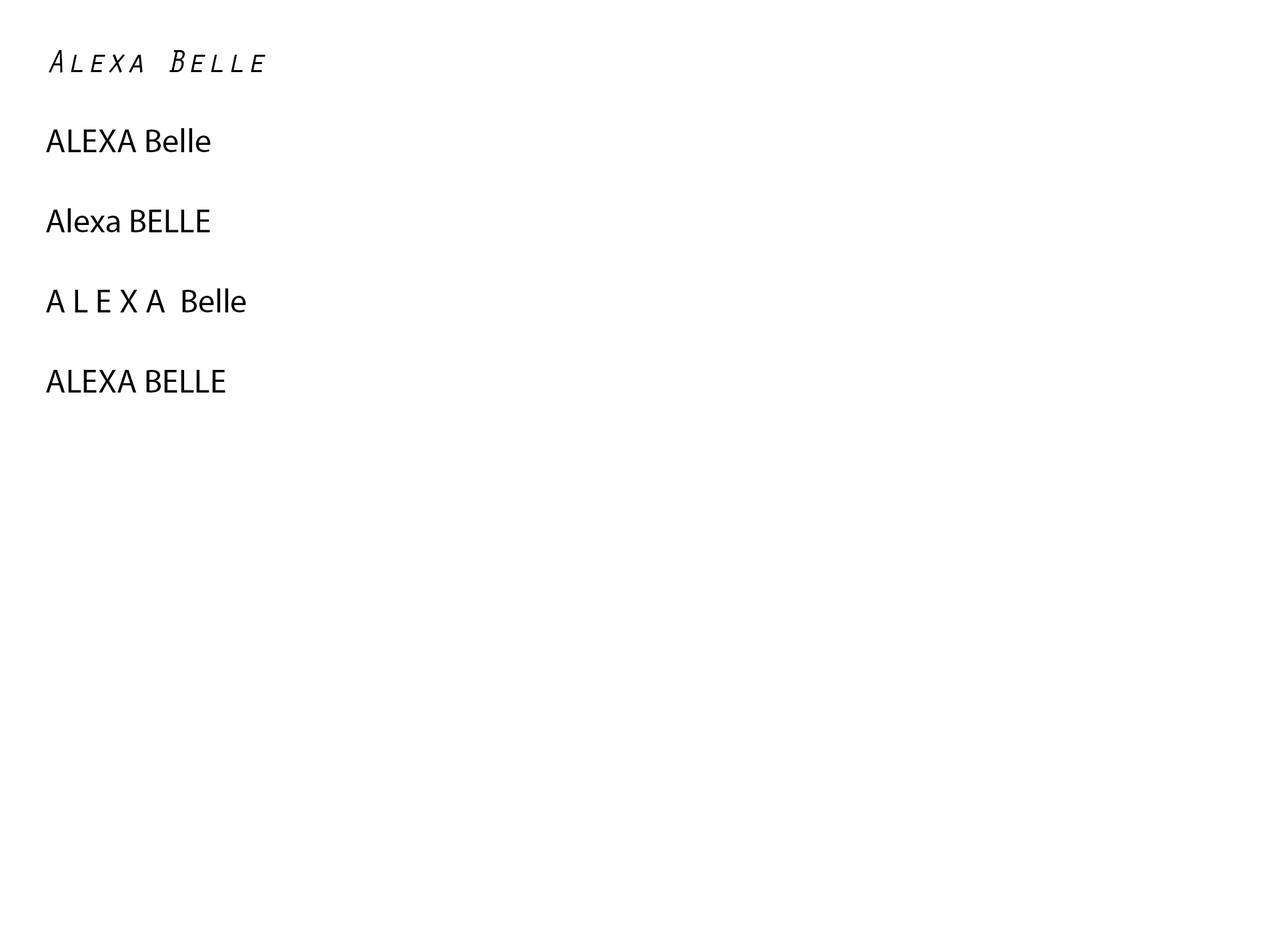
<style>
.page{position:relative;width:1261px;height:946px;background:#ffffff}
.page>*{position:absolute;margin:0}
.t1{font:33.4px "MyriadPro-Regular";color:#000000}
.t2{font:33.4px "OratorStd-Slanted";color:#000000}
</style>
<div class="page">
<p class="t1" style="left:46px;top:50px;width:220px;height:342px"><span class="t2">Alexa Belle<br></span><br>ALEXA Belle<br><br>Alexa BELLE<br><br>A L E X A  Belle<br><br>ALEXA BELLE</p>
</div>
